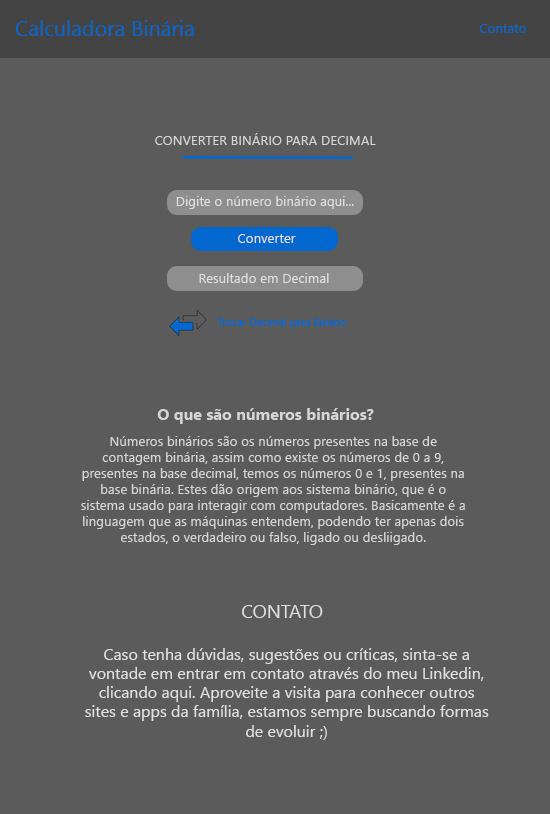
<style>
.page{position:relative;width:550px;height:814px;background:#5b5b5b}
.page>*{position:absolute;margin:0}
.t1{font:21.3px "NirmalaUI";color:#0268d0}
.t2{font:13.3px "NirmalaUI";color:#0268d0}
.t3{font:13.3px "NirmalaUI";color:#d7d7d7}
.t4{font:13.3px "NirmalaUI";color:#e0dfdf}
.t5{font:10.7px "NirmalaUI";color:#0268d0}
.t6{font:16px "NirmalaUI-Bold";color:#d6d5d5}
.t7{font:13.3px "NirmalaUI";color:#d6d5d5}
.t8{font:18.7px "NirmalaUI";color:#e0dfdf}
.t9{font:16px "NirmalaUI";color:#e0dfdf}
</style>
<div class="page">
<p class="t1" style="left:15px;top:20px;width:179px;height:16px">Calculadora Binária</p>
<p class="t2" style="left:480px;top:24px;width:46px;height:9px">Contato</p>
<p class="t3" style="left:155px;top:133px;width:221px;height:12px">CONVERTER BINÁRIO PARA DECIMAL</p>
<p class="t4" style="left:176px;top:196px;width:178px;height:13px">Digite o número binário aqui...</p>
<p class="t4" style="left:238px;top:234px;width:58px;height:9px">Converter</p>
<p class="t4" style="left:199px;top:273px;width:130px;height:10px">Resultado em Decimal</p>
<p class="t5" style="left:217px;top:317px;width:129px;height:11px">Trocar Decimal para Binário</p>
<p class="t6" style="left:157px;top:408px;width:217px;height:16px">O que são números binários?</p>
<p class="t7" style="left:81px;top:436px;width:384px;height:109px;text-align:center">Números binários são os números presentes na base de contagem binária, assim como existe os números de 0 a 9, presentes na base decimal, temos os números 0 e 1, presentes na base binária. Estes dão origem aos sistema binário, que é o sistema usado para interagir com computadores. Basicamente é a linguagem que as máquinas entendem, podendo ter apenas dois estados, o verdadeiro ou falso, ligado ou desliigado.</p>
<p class="t8" style="left:242px;top:605px;width:81px;height:13px">CONTATO</p>
<p class="t9" style="left:85px;top:648px;width:404px;height:92px;text-align:center">Caso tenha dúvidas, sugestões ou críticas, sinta-se a vontade em entrar em contato através do meu Linkedin, clicando aqui. Aproveite a visita para conhecer outros sites e apps da família, estamos sempre buscando formas de evoluir ;)</p>
</div>
